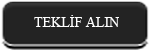
<style>
.page{position:relative;width:150px;height:50px;background:#232323}
.page>*{position:absolute;margin:0}
.t1{font:14px "TimesNewRomanPSMT";color:#ffffff}
</style>
<div class="page">
<p class="t1" style="left:34px;top:15px;width:85px;height:12px">TEKLİF ALIN</p>
</div>
